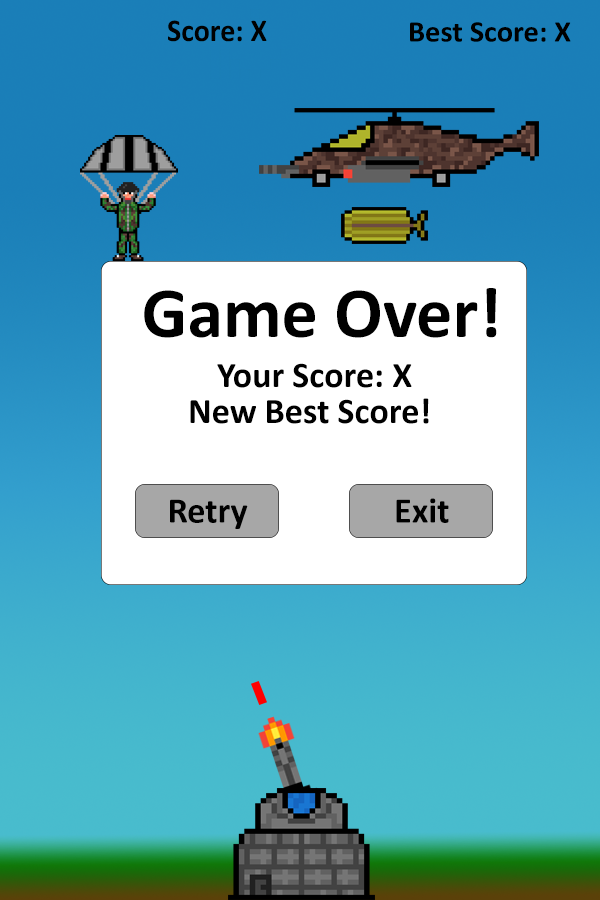
<style>
.page{position:relative;width:600px;height:900px}
.page>*{position:absolute;margin:0}
.t1{font:31.8px "Calibri-Bold";color:#010101;scale:0.95 1}
.t2{font:30px "Calibri-Bold";color:#000000}
.t3{font:72px "Calibri-Bold";color:#000000}
.t4{font:36px "Calibri-Bold";color:#000000}
</style>
<div class="page">
<p class="t1" style="left:168px;top:20px;width:99px;height:22px">Score: X</p>
<p class="t2" style="left:410px;top:22px;width:161px;height:20px">Best Score: X</p>
<p class="t3" style="left:144px;top:288px;width:353px;height:50px">Game Over!</p>
<p class="t4" style="left:217px;top:363px;width:195px;height:25px">Your Score: X</p>
<p class="t4" style="left:190px;top:398px;width:239px;height:26px">New Best Score!</p>
<p class="t4" style="left:170px;top:499px;width:78px;height:30px">Retry</p>
<p class="t4" style="left:396px;top:498px;width:53px;height:25px">Exit</p>
</div>
